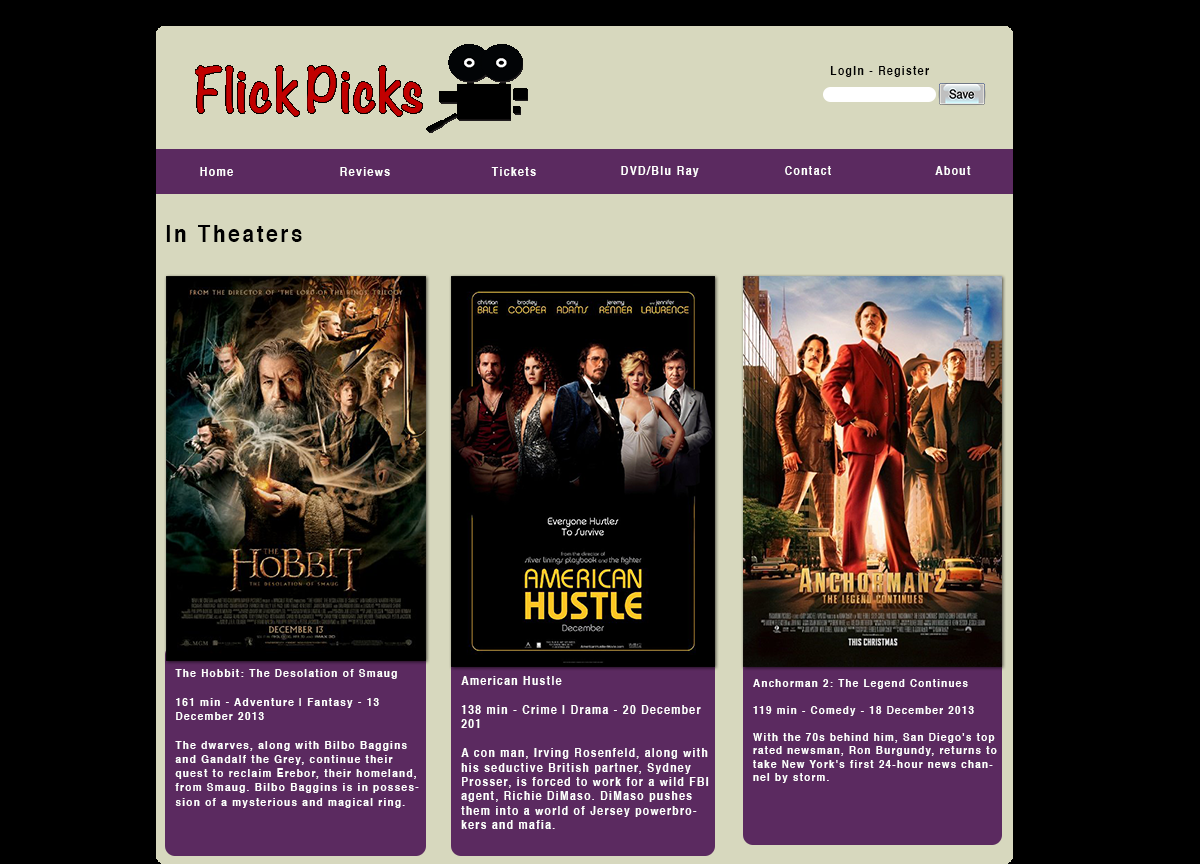
<style>
.page{position:relative;width:1200px;height:864px;background:#000000}
.page>*{position:absolute;margin:0}
.t1{font:12px "Helvetica-Bold";letter-spacing:0.13em;color:#000000;scale:0.86 1}
.t2{font:12px "Helvetica-Bold";letter-spacing:0.13em;color:#ffffff;scale:0.88 1}
.t3{font:12px "Helvetica-Bold";letter-spacing:0.13em;color:#ffffff;scale:0.86 1}
.t4{font:24px "Helvetica-Bold";letter-spacing:0.13em;color:#000000;scale:0.86 1}
.t5{font:11.9px "Helvetica-Bold";letter-spacing:0.13em;color:#ffffff;scale:0.84 1}
.t6{font:11.2px "Helvetica-Bold";letter-spacing:0.13em;color:#ffffff;scale:0.87 1}
</style>
<div class="page">
<p class="t1" style="left:830px;top:66px;width:99px;height:11px">LogIn - Register</p>
<p class="t2" style="left:200px;top:167px;width:33px;height:9px">Home</p>
<p class="t2" style="left:340px;top:167px;width:50px;height:9px">Reviews</p>
<p class="t2" style="left:491px;top:167px;width:45px;height:9px">Tickets</p>
<p class="t2" style="left:621px;top:166px;width:78px;height:11px">DVD/Blu Ray</p>
<p class="t3" style="left:785px;top:166px;width:46px;height:9px">Contact</p>
<p class="t3" style="left:935px;top:166px;width:36px;height:9px">About</p>
<p class="t4" style="left:166px;top:225px;width:136px;height:17px">In Theaters</p>
<p class="t5" style="left:175px;top:669px;width:244px;height:139px">The Hobbit: The Desolation of Smaug<br><br>161 min - Adventure | Fantasy - 13 December 2013<br><br>The dwarves, along with Bilbo Baggins and Gandalf the Grey, continue their quest to reclaim Erebor, their homeland, from Smaug. Bilbo Baggins is in possession of a mysterious and magical ring.</p>
<p class="t3" style="left:461px;top:676px;width:248px;height:153px">American Hustle<br><br>138 min - Crime | Drama - 20 December 201<br><br>A con man, Irving Rosenfeld, along with his seductive British partner, Sydney Prosser, is forced to work for a wild FBI agent, Richie DiMaso. DiMaso pushes them into a world of Jersey powerbrokers and mafia.</p>
<p class="t6" style="left:753px;top:679px;width:244px;height:104px">Anchorman 2: The Legend Continues<br><br>119 min - Comedy - 18 December 2013<br><br>With the 70s behind him, San Diego's top rated newsman, Ron Burgundy, returns to take New York's first 24-hour news channel by storm.</p>
</div>
